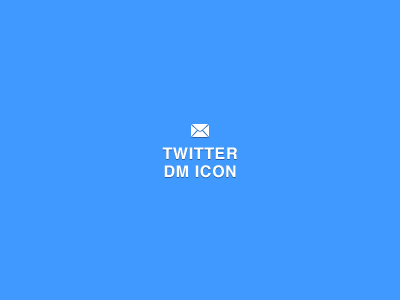
<style>
.page{position:relative;width:400px;height:300px;background:#4099ff}
.page>*{position:absolute;margin:0}
.t1{font:16px/18px "Helvetica-Bold";letter-spacing:0.04em;color:#ffffff}
</style>
<div class="page">
<p class="t1" style="left:162px;top:147px;width:75px;height:31px;text-align:center">TWITTER<br>DM ICON</p>
</div>
